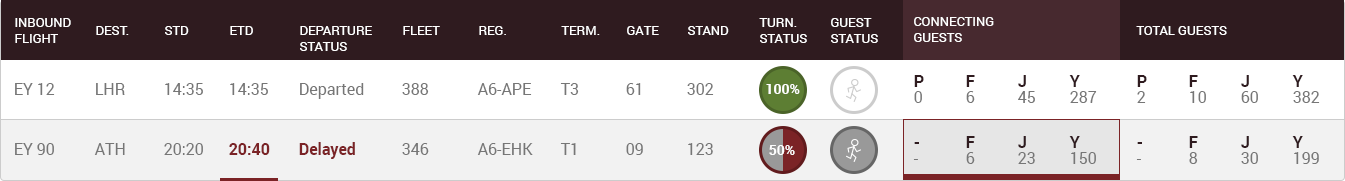
<style>
.page{position:relative;width:1345px;height:181px;background:#ffffff}
.page>*{position:absolute;margin:0}
.t1{font:13px "Roboto-Regular";color:#ffffff;text-transform:uppercase}
.t2{font:16px/16px "Roboto-Bold";color:#2f1b1f}
.t3{font:16px/16px "Roboto-Regular";color:#767676}
.t4{font:16px "Roboto-Regular";color:#767676}
.t5{font:14px "Roboto-Bold";color:#fefefe}
.t6{font:16px "Roboto-Bold";color:#7b2326}
</style>
<div class="page">
<p class="t1" style="left:914px;top:17px;width:80px;height:25px">Connecting<br>Guests</p>
<p class="t1" style="left:15px;top:18px;width:56px;height:25px">Inbound<br>Flight</p>
<p class="t1" style="left:96px;top:26px;width:33px;height:9px">Dest.</p>
<p class="t1" style="left:165px;top:26px;width:24px;height:9px">STD</p>
<p class="t1" style="left:230px;top:26px;width:23px;height:9px">ETD</p>
<p class="t1" style="left:300px;top:26px;width:72px;height:25px">Departure<br>Status</p>
<p class="t1" style="left:403px;top:26px;width:37px;height:9px">Fleet</p>
<p class="t1" style="left:479px;top:26px;width:27px;height:9px">Reg.</p>
<p class="t1" style="left:561px;top:26px;width:39px;height:9px">TERM.</p>
<p class="t1" style="left:627px;top:26px;width:32px;height:9px">Gate</p>
<p class="t1" style="left:688px;top:26px;width:41px;height:9px">Stand</p>
<p class="t1" style="left:759px;top:18px;width:48px;height:25px">Turn.<br>Status</p>
<p class="t1" style="left:831px;top:18px;width:47px;height:25px">Guest<br>Status</p>
<p class="t1" style="left:1136px;top:26px;width:91px;height:9px">Total Guests</p>
<p class="t2" style="left:914px;top:75px;width:10px;height:28px">P<br><span class="t3">0</span></p>
<p class="t2" style="left:966px;top:75px;width:9px;height:28px">F<br><span class="t3">6</span></p>
<p class="t3" style="left:1018px;top:75px;width:17px;height:28px"><span class="t2">J<br></span>45</p>
<p class="t3" style="left:1069px;top:75px;width:28px;height:28px"><span class="t2">Y<br></span>287</p>
<p class="t2" style="left:1137px;top:75px;width:10px;height:28px">P<br><span class="t3">2</span></p>
<p class="t3" style="left:1189px;top:75px;width:17px;height:28px"><span class="t2">F<br></span>10</p>
<p class="t3" style="left:1241px;top:75px;width:17px;height:28px"><span class="t2">J<br></span>60</p>
<p class="t3" style="left:1292px;top:75px;width:28px;height:28px"><span class="t2">Y<br></span>382</p>
<p class="t4" style="left:15px;top:83px;width:40px;height:12px">EY 12</p>
<p class="t4" style="left:96px;top:83px;width:29px;height:12px">LHR</p>
<p class="t4" style="left:165px;top:83px;width:38px;height:12px">14:35</p>
<p class="t4" style="left:230px;top:83px;width:38px;height:12px">14:35</p>
<p class="t4" style="left:300px;top:83px;width:64px;height:16px">Departed</p>
<p class="t4" style="left:402px;top:83px;width:27px;height:12px">388</p>
<p class="t4" style="left:477px;top:83px;width:55px;height:12px">A6-APE</p>
<p class="t4" style="left:560px;top:83px;width:19px;height:12px">T3</p>
<p class="t4" style="left:626px;top:83px;width:15px;height:12px">61</p>
<p class="t4" style="left:687px;top:83px;width:27px;height:12px">302</p>
<p class="t5" style="left:766px;top:84px;width:34px;height:10px">100%</p>
<p class="t2" style="left:966px;top:136px;width:9px;height:28px">F<br><span class="t3">6</span></p>
<p class="t3" style="left:1018px;top:136px;width:17px;height:28px"><span class="t2">J<br></span>23</p>
<p class="t3" style="left:1069px;top:136px;width:27px;height:28px"><span class="t2">Y<br></span>150</p>
<p class="t2" style="left:1189px;top:136px;width:9px;height:28px">F<br><span class="t3">8</span></p>
<p class="t3" style="left:1241px;top:136px;width:17px;height:28px"><span class="t2">J<br></span>30</p>
<p class="t3" style="left:1292px;top:136px;width:27px;height:28px"><span class="t2">Y<br></span>199</p>
<p class="t4" style="left:15px;top:143px;width:39px;height:12px">EY 90</p>
<p class="t4" style="left:94px;top:143px;width:31px;height:12px">ATH</p>
<p class="t4" style="left:164px;top:143px;width:39px;height:12px">20:20</p>
<p class="t6" style="left:229px;top:143px;width:41px;height:12px">20:40</p>
<p class="t6" style="left:299px;top:142px;width:56px;height:17px">Delayed</p>
<p class="t4" style="left:402px;top:143px;width:27px;height:12px">346</p>
<p class="t4" style="left:477px;top:143px;width:56px;height:12px">A6-EHK</p>
<p class="t4" style="left:560px;top:143px;width:16px;height:12px">T1</p>
<p class="t4" style="left:626px;top:143px;width:17px;height:12px">09</p>
<p class="t4" style="left:688px;top:143px;width:25px;height:12px">123</p>
<p class="t5" style="left:769px;top:145px;width:26px;height:10px">50%</p>
<p class="t2" style="left:913px;top:142px;width:6px;height:18px">-<br><span class="t3">-</span></p>
<p class="t2" style="left:1136px;top:142px;width:6px;height:18px">-<br><span class="t3">-</span></p>
</div>
